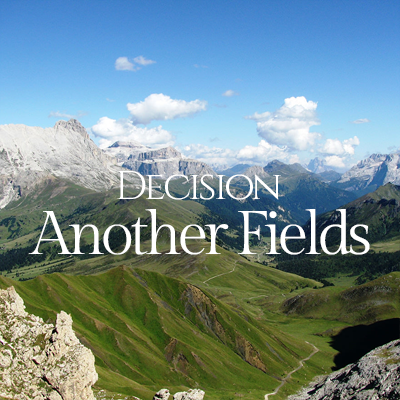
<style>
.page{position:relative;width:400px;height:400px}
.page>*{position:absolute;margin:0}
.t1{font:40px "Cinzel-Regular";letter-spacing:-0.075em;color:#ffffff}
.t2{font:61.3px "GildaDisplay-Regular";letter-spacing:-0.075em;color:#ffffff}
</style>
<div class="page">
<p class="t1" style="left:117px;top:171px;width:164px;height:29px">Decision</p>
<p class="t2" style="left:28px;top:209px;width:342px;height:46px">Another Fields</p>
</div>
